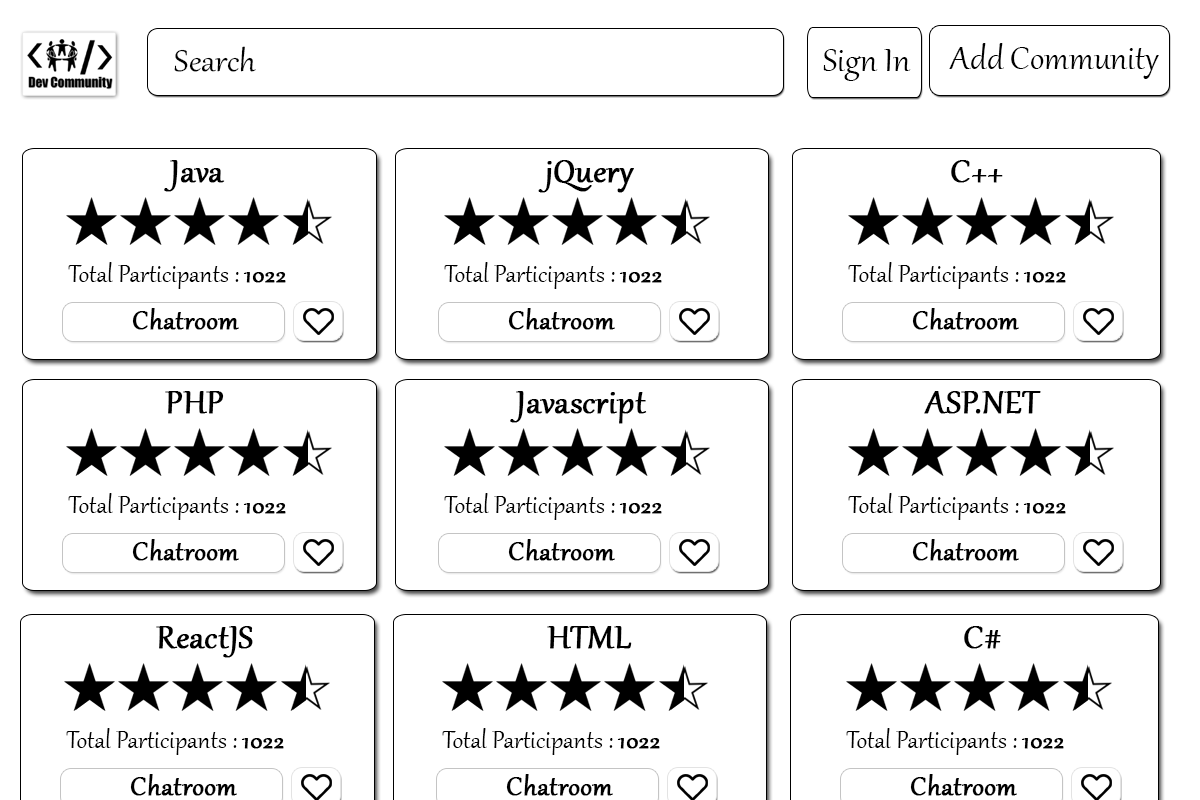
<style>
.page{position:relative;width:1200px;height:800px;background:#ffffff}
.page>*{position:absolute;margin:0}
.t1{font:36.7px "Gabriola";color:#000000;scale:1.09 1}
.t2{font:40px "Gabriola";color:#000000}
.t3{font:40px "Gabriola";color:#000000;font-weight:bold}
.t4{font:30px "Gabriola";color:#000000}
.t5{font:30px "Gabriola";color:#000000;font-weight:bold}
.t6{font:32px "Gabriola";color:#000000;font-weight:bold}
</style>
<div class="page">
<p class="t1" style="left:174px;top:46px;width:82px;height:26px">Search</p>
<p class="t2" style="left:823px;top:49px;width:88px;height:32px">Sign In</p>
<p class="t2" style="left:949px;top:43px;width:210px;height:36px">Add Community</p>
<p class="t3" style="left:164px;top:160px;width:61px;height:32px">Java</p>
<p class="t3" style="left:538px;top:160px;width:96px;height:33px">jQuery</p>
<p class="t3" style="left:951px;top:160px;width:52px;height:23px">++C</p>
<p class="t4" style="left:68px;top:262px;width:218px;height:27px">Total Participants : <span class="t5">1022</span></p>
<p class="t4" style="left:444px;top:262px;width:218px;height:27px">Total Participants : <span class="t5">1022</span></p>
<p class="t4" style="left:848px;top:262px;width:218px;height:27px">Total Participants : <span class="t5">1022</span></p>
<p class="t6" style="left:132px;top:308px;width:107px;height:22px">Chatroom</p>
<p class="t6" style="left:508px;top:308px;width:107px;height:22px">Chatroom</p>
<p class="t6" style="left:912px;top:308px;width:107px;height:22px">Chatroom</p>
<p class="t3" style="left:165px;top:391px;width:59px;height:23px">PHP</p>
<p class="t3" style="left:510px;top:391px;width:137px;height:33px">Javascript</p>
<p class="t3" style="left:924px;top:391px;width:117px;height:23px">ASP.NET</p>
<p class="t4" style="left:68px;top:493px;width:218px;height:27px">Total Participants : <span class="t5">1022</span></p>
<p class="t4" style="left:444px;top:493px;width:218px;height:27px">Total Participants : <span class="t5">1022</span></p>
<p class="t4" style="left:848px;top:493px;width:218px;height:27px">Total Participants : <span class="t5">1022</span></p>
<p class="t6" style="left:132px;top:539px;width:107px;height:22px">Chatroom</p>
<p class="t6" style="left:508px;top:539px;width:107px;height:22px">Chatroom</p>
<p class="t6" style="left:912px;top:539px;width:107px;height:22px">Chatroom</p>
<p class="t3" style="left:156px;top:626px;width:97px;height:32px">ReactJS</p>
<p class="t3" style="left:547px;top:626px;width:85px;height:23px">HTML</p>
<p class="t3" style="left:964px;top:626px;width:37px;height:23px">#C</p>
<p class="t4" style="left:66px;top:728px;width:218px;height:27px">Total Participants : <span class="t5">1022</span></p>
<p class="t4" style="left:442px;top:728px;width:218px;height:27px">Total Participants : <span class="t5">1022</span></p>
<p class="t4" style="left:846px;top:728px;width:218px;height:27px">Total Participants : <span class="t5">1022</span></p>
<p class="t6" style="left:130px;top:774px;width:107px;height:22px">Chatroom</p>
<p class="t6" style="left:506px;top:774px;width:107px;height:22px">Chatroom</p>
<p class="t6" style="left:910px;top:774px;width:107px;height:22px">Chatroom</p>
</div>
